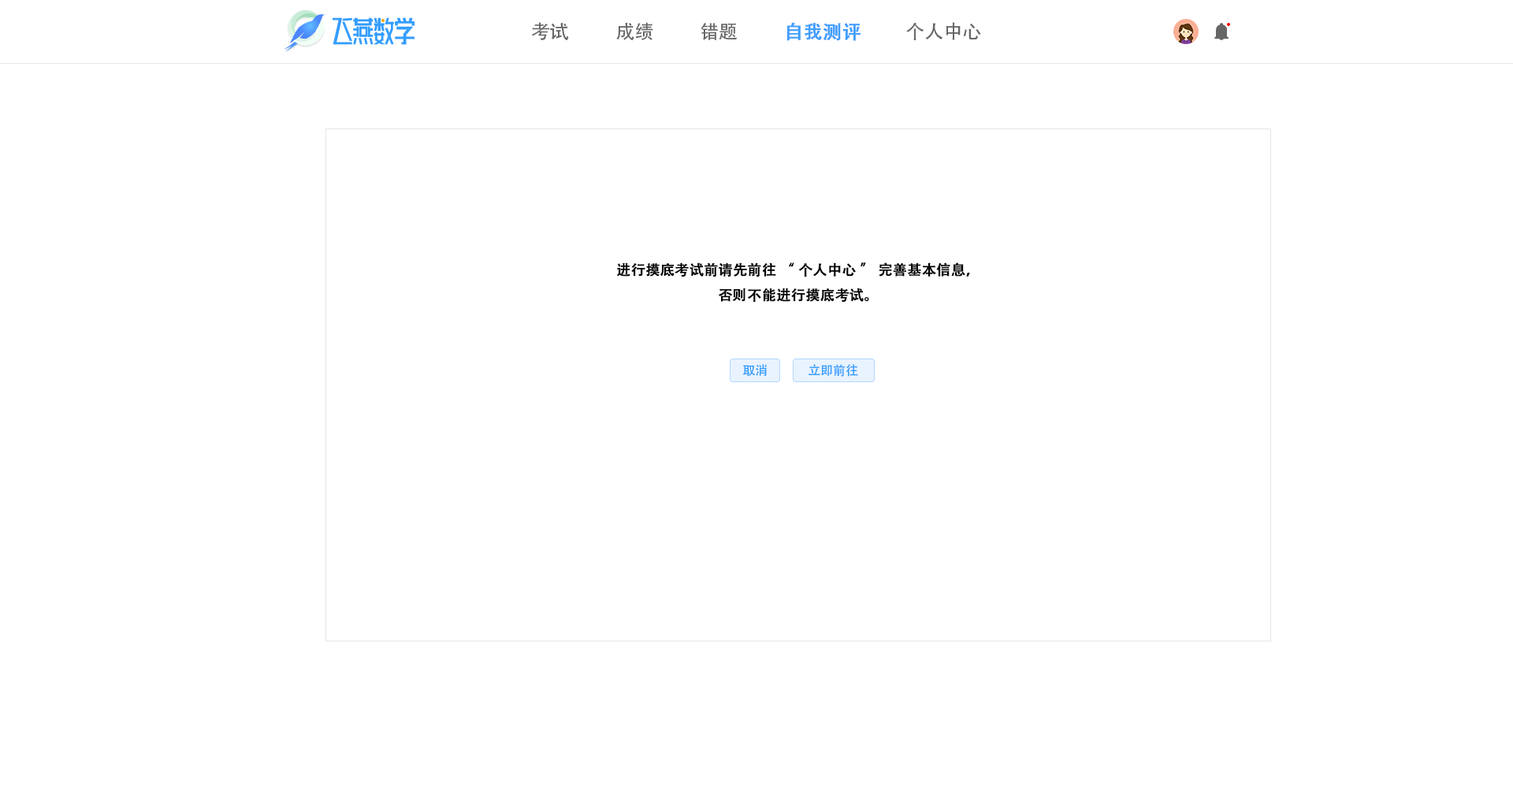
<style>
.page{position:relative;width:1513px;height:788px;background:#ffffff}
.page>*{position:absolute;margin:0}
.t1{font:18.9px "AdobeHeitiStd-Regular";color:#666666}
.t2{font:18.9px "AdobeHeitiStd-Regular";color:#409eff;font-weight:bold}
.t3{font:14.2px "AdobeHeitiStd-Regular";color:#000000;font-weight:bold}
.t4{font:12.6px "AdobeHeitiStd-Regular";color:#339dff}
</style>
<div class="page">
<p class="t1" style="left:531px;top:22px;width:38px;height:18px">考试</p>
<p class="t1" style="left:616px;top:22px;width:37px;height:18px">成绩</p>
<p class="t1" style="left:701px;top:23px;width:36px;height:17px">错题</p>
<p class="t2" style="left:786px;top:22px;width:75px;height:19px">自我测评</p>
<p class="t1" style="left:906px;top:22px;width:75px;height:18px">个人中心</p>
<p class="t3" style="left:617px;top:262px;width:353px;height:41px;text-align:center">进行摸底考试前请先前往“个人中心”完善基本信息，<br>否则不能进行摸底考试。</p>
<p class="t4" style="left:743px;top:364px;width:25px;height:13px">取消</p>
<p class="t4" style="left:809px;top:364px;width:49px;height:13px">立即前往</p>
</div>
